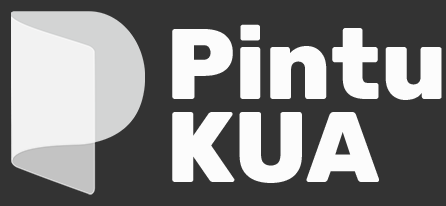
<style>
.page{position:relative;width:446px;height:206px;background:#333333}
.page>*{position:absolute;margin:0}
.t1{font:100px/83.3px "Rubik-ExtraBold";color:#fcfcfc}
</style>
<div class="page">
<p class="t1" style="left:172px;top:24px;width:270px;height:159px">Pintu<br>KUA</p>
</div>
